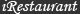
<style>
.page{position:relative;width:80px;height:14px;background:#333333}
.page>*{position:absolute;margin:0}
.t1{font:18px "MonotypeCorsiva";color:#ffffff}
</style>
<div class="page">
<p class="t1" style="left:2px;top:0px;width:76px;height:14px">iRestaurant</p>
</div>
